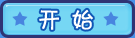
<style>
.page{position:relative;width:135px;height:38px;background:#76d7f4}
.page>*{position:absolute;margin:0}
.t1{font:24px "FZKATJW--GB1-0";color:#ffffff}
</style>
<div class="page">
<p class="t1" style="left:39px;top:9px;width:54px;height:21px">开  始</p>
</div>
